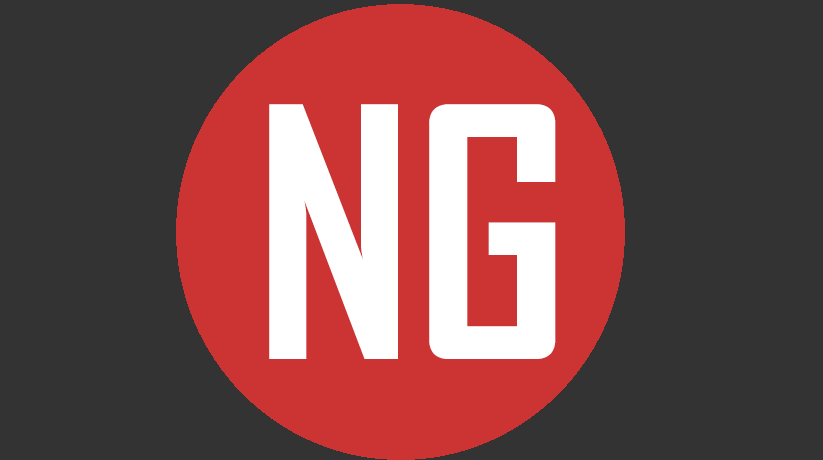
<style>
.page{position:relative;width:823px;height:460px;background:#333333}
.page>*{position:absolute;margin:0}
.t1{font:333.3px "AgencyFB-Bold";color:#ffffff}
</style>
<div class="page">
<p class="t1" style="left:269px;top:104px;width:287px;height:255px">NG</p>
</div>
